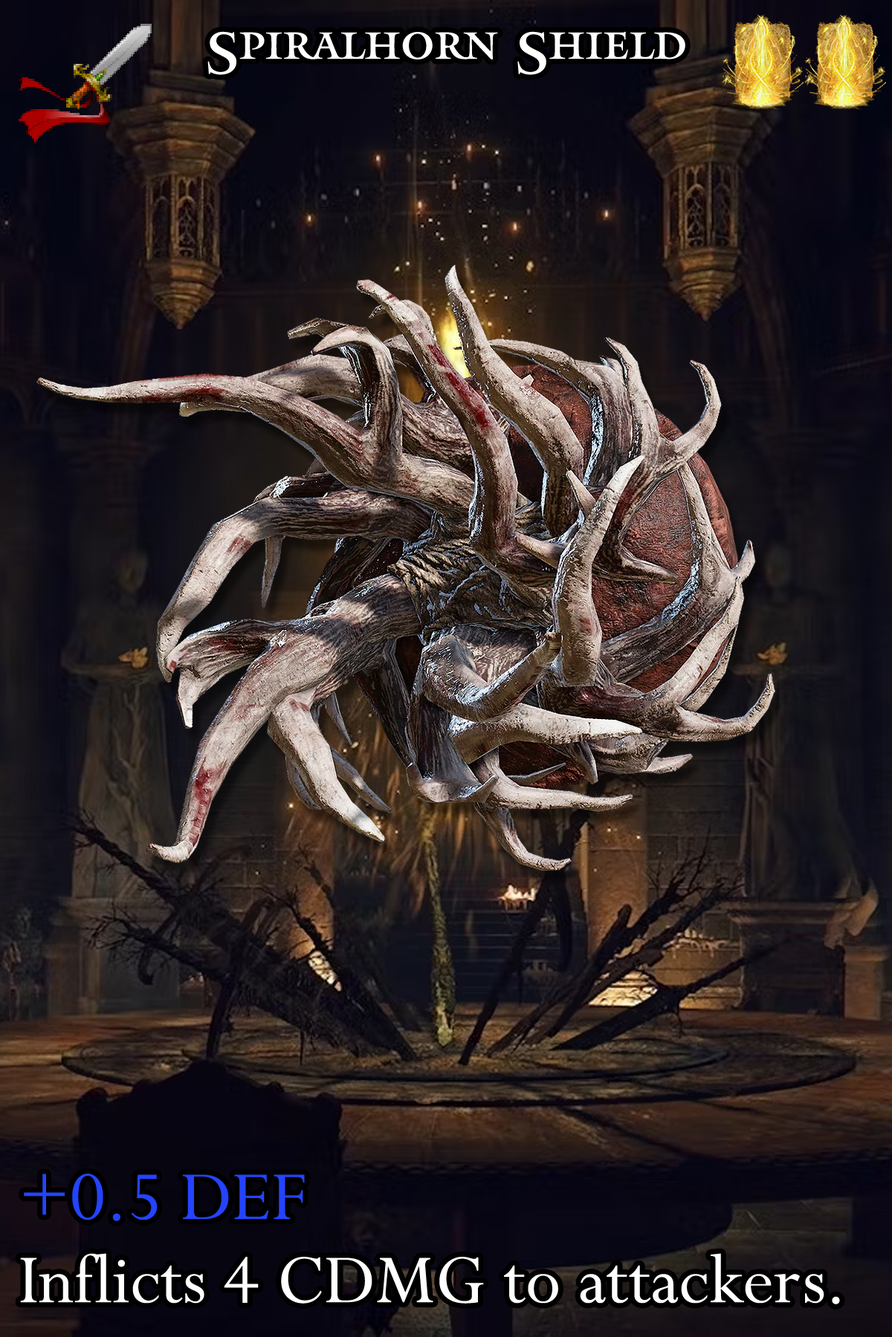
<style>
.page{position:relative;width:892px;height:1337px}
.page>*{position:absolute;margin:0}
.t1{font:101px "Mantinia";color:#ffffff}
.t2{font:132.3px/83.2px "Perpetua";color:#ffffff}
.t3{font:132.3px/83.2px "Perpetua";color:#2443ff}
</style>
<div class="page">
<p class="t1" style="left:207px;top:31px;width:478px;height:44px">Spiralhorn Shield</p>
<p class="t2" style="left:20px;top:1174px;width:820px;height:131px"><span class="t3">+0.5 DEF<br></span>Inflicts 4 CDMG to attackers.</p>
</div>
